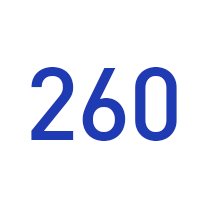
<style>
.page{position:relative;width:208px;height:208px;background:#ffffff}
.page>*{position:absolute;margin:0}
.t1{font:100.9px "DIN-Medium";letter-spacing:-0.02em;color:#1f3bb3}
</style>
<div class="page">
<p class="t1" style="left:31px;top:67px;width:146px;height:74px">260</p>
</div>
